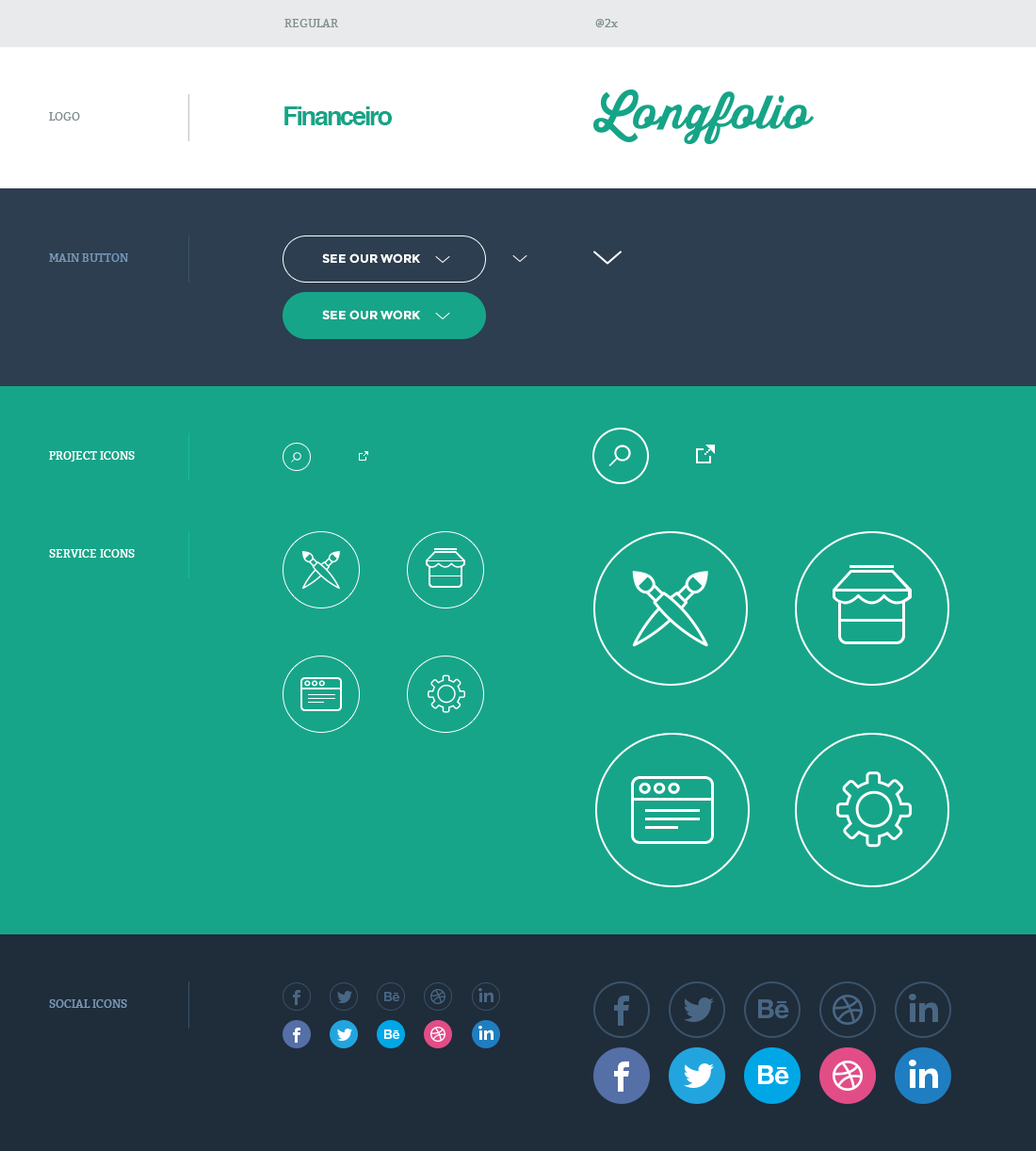
<style>
.page{position:relative;width:1036px;height:1151px;background:#17a589}
.page>*{position:absolute;margin:0}
.t1{font:11.3px "Bitter-Regular";color:#7f8c8d}
.t2{font:25.4px "Helvetica-Bold";letter-spacing:-0.08em;color:#16a487}
.t3{font:11.3px "Bitter-Regular";color:#7999b7}
.t4{font:12.2px "Montserrat-Bold";color:#ffffff}
.t5{font:11.3px "Bitter-Regular";color:#ffffff}
</style>
<div class="page">
<p class="t1" style="left:284px;top:19px;width:54px;height:8px">REGULAR</p>
<p class="t1" style="left:595px;top:19px;width:23px;height:8px">@2x</p>
<p class="t1" style="left:49px;top:112px;width:31px;height:9px">LOGO</p>
<p class="t2" style="left:284px;top:106px;width:109px;height:19px">Financeiro</p>
<p class="t3" style="left:49px;top:253px;width:80px;height:9px">MAIN BUTTON</p>
<p class="t4" style="left:322px;top:253px;width:98px;height:10px">SEE OUR WORK</p>
<p class="t4" style="left:322px;top:310px;width:98px;height:9px">SEE OUR WORK</p>
<p class="t5" style="left:49px;top:451px;width:86px;height:11px">PROJECT ICONS</p>
<p class="t5" style="left:49px;top:549px;width:86px;height:9px">SERVICE ICONS</p>
<p class="t3" style="left:49px;top:999px;width:78px;height:9px">SOCIAL ICONS</p>
</div>
